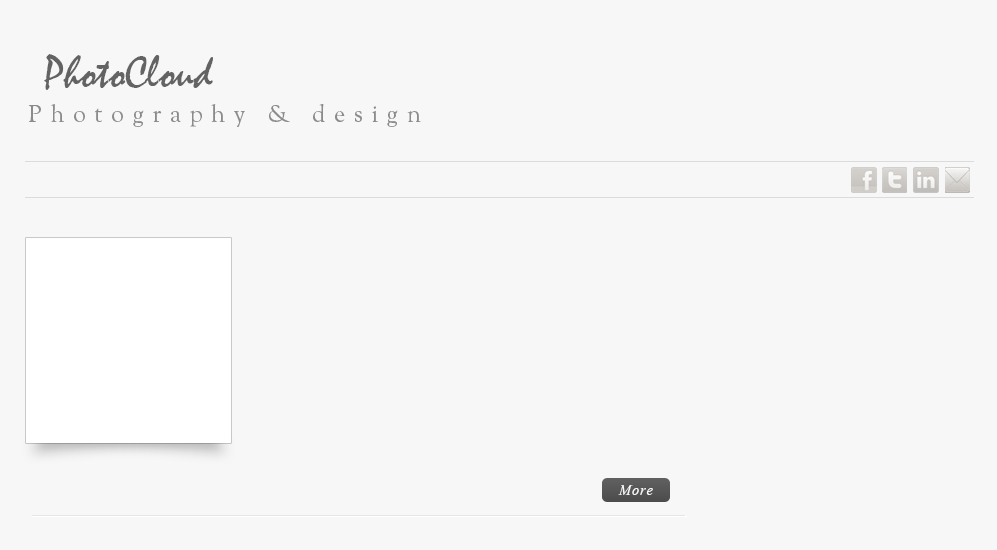
<style>
.page{position:relative;width:997px;height:550px;background:#f7f7f7}
.page>*{position:absolute;margin:0}
.t1{font:45.6px "Mistral";color:#636363}
.t2{font:24px "OFLGoudyStM";letter-spacing:0.35em;color:#8b8b8b}
.t3{font:18px "Vijaya";letter-spacing:0.05em;color:#f7f7f7}
</style>
<div class="page">
<p class="t1" style="left:44px;top:54px;width:169px;height:36px">PhotoCloud</p>
<p class="t2" style="left:28px;top:103px;width:393px;height:24px">Photography &amp; design</p>
<p class="t3" style="left:618px;top:485px;width:35px;height:10px">More</p>
</div>
